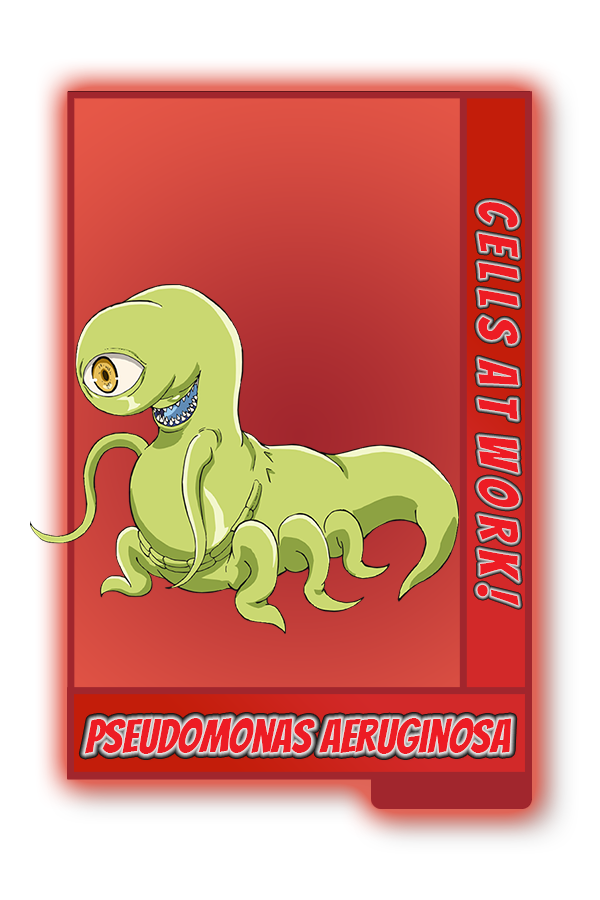
<style>
.page{position:relative;width:600px;height:900px;background:#ffffff}
.page>*{position:absolute;margin:0}
.t1{font:54px "Bangers-Regular";color:#ed1c24}
.t2{font:45.8px "Bangers-Regular";color:#ed1c24}
</style>
<div class="page">
<p class="t1" style="left:477px;top:202px;width:42px;height:404px;rotate:90deg">C e l l S  A t  W o r k !</p>
<p class="t2" style="left:84px;top:718px;width:428px;height:36px">Pseudomonas Aeruginosa</p>
</div>
